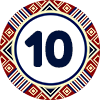
<style>
.page{position:relative;width:100px;height:100px;background:#ffffff}
.page>*{position:absolute;margin:0}
.t1{font:49.2px "ForkdokaOne-Regular";color:#00113a}
</style>
<div class="page">
<p class="t1" style="left:24px;top:30px;width:49px;height:38px">10</p>
</div>
